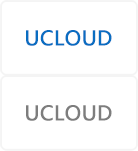
<style>
.page{position:relative;width:138px;height:151px;background:#ffffff}
.page>*{position:absolute;margin:0}
.t1{font:20px "MicrosoftYaHei";color:#096dc1;font-weight:bold}
.t2{font:20px "MicrosoftYaHei";color:#7d7d7d;font-weight:bold}
</style>
<div class="page">
<p class="t1" style="left:26px;top:30px;width:86px;height:16px">UCLOUD</p>
<p class="t2" style="left:26px;top:105px;width:86px;height:16px">UCLOUD</p>
</div>
